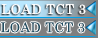
<style>
.page{position:relative;width:100px;height:38px;background:#7f7f7f}
.page>*{position:absolute;margin:0}
.t1{font:13.3px "CenturySchoolbook";letter-spacing:0.025em;color:#ffffff}
.t2{font:13.3px "CenturySchoolbook";letter-spacing:0.025em;color:#214e61}
</style>
<div class="page">
<p class="t1" style="left:1px;top:4px;width:85px;height:11px">LOAD TCT 3</p>
<p class="t2" style="left:0px;top:22px;width:85px;height:11px">LOAD TCT 3</p>
</div>
